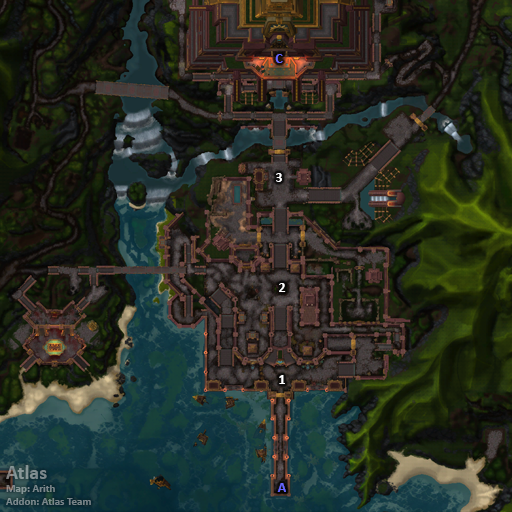
<style>
.page{position:relative;width:512px;height:512px}
.page>*{position:absolute;margin:0}
.t1{font:14px "Calibri-Bold";color:#6666ff}
.t2{font:14px "Calibri-Bold";color:#ffffff}
.t3{font:11px "Calibri-Bold";color:#7c888c}
.t4{font:20px "Calibri-Bold";color:#7c888c}
</style>
<div class="page">
<p class="t1" style="left:275px;top:54px;width:8px;height:9px">C</p>
<p class="t2" style="left:276px;top:173px;width:6px;height:9px">3</p>
<p class="t2" style="left:279px;top:283px;width:7px;height:9px">2</p>
<p class="t2" style="left:279px;top:375px;width:6px;height:9px">1</p>
<p class="t3" style="left:6px;top:465px;width:85px;height:40px"><span class="t4">Atlas<br></span>Map: Arith<br>Addon: Atlas Team</p>
<p class="t1" style="left:277px;top:483px;width:9px;height:9px">A</p>
</div>
